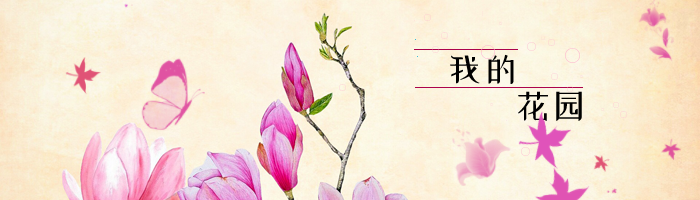
<style>
.page{position:relative;width:700px;height:200px}
.page>*{position:absolute;margin:0}
.t1{font:36px "xiaowei";color:#000000}
</style>
<div class="page">
<p class="t1" style="left:450px;top:54px;width:64px;height:30px">我的</p>
<p class="t1" style="left:518px;top:91px;width:64px;height:30px">花园</p>
</div>
